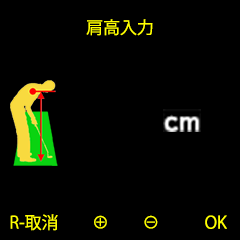
<style>
.page{position:relative;width:240px;height:240px;background:#000000}
.page>*{position:absolute;margin:0}
.t1{font:16.9px "KozGoPr6N-Regular";color:#ffff00}
</style>
<div class="page">
<p class="t1" style="left:86px;top:19px;width:67px;height:17px">肩高入力</p>
<p class="t1" style="left:10px;top:214px;width:217px;height:17px">R-取消　　⊕　　⊖　 　  OK</p>
</div>
